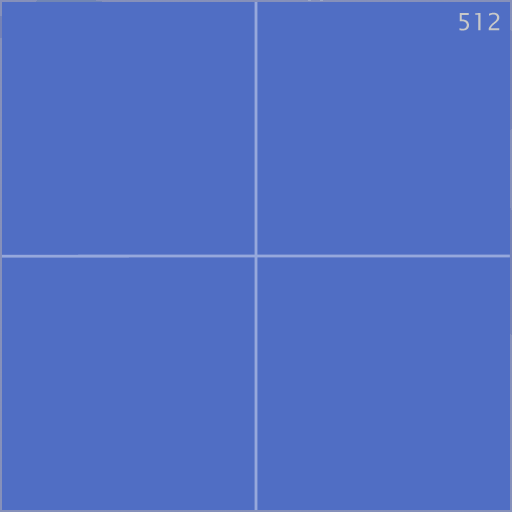
<style>
.page{position:relative;width:512px;height:512px;background:#506ec4}
.page>*{position:absolute;margin:0}
.t1{font:24px "LucidaSans";color:#c8c8c8;text-transform:uppercase}
</style>
<div class="page">
<p class="t1" style="left:459px;top:12px;width:41px;height:19px">512</p>
</div>
